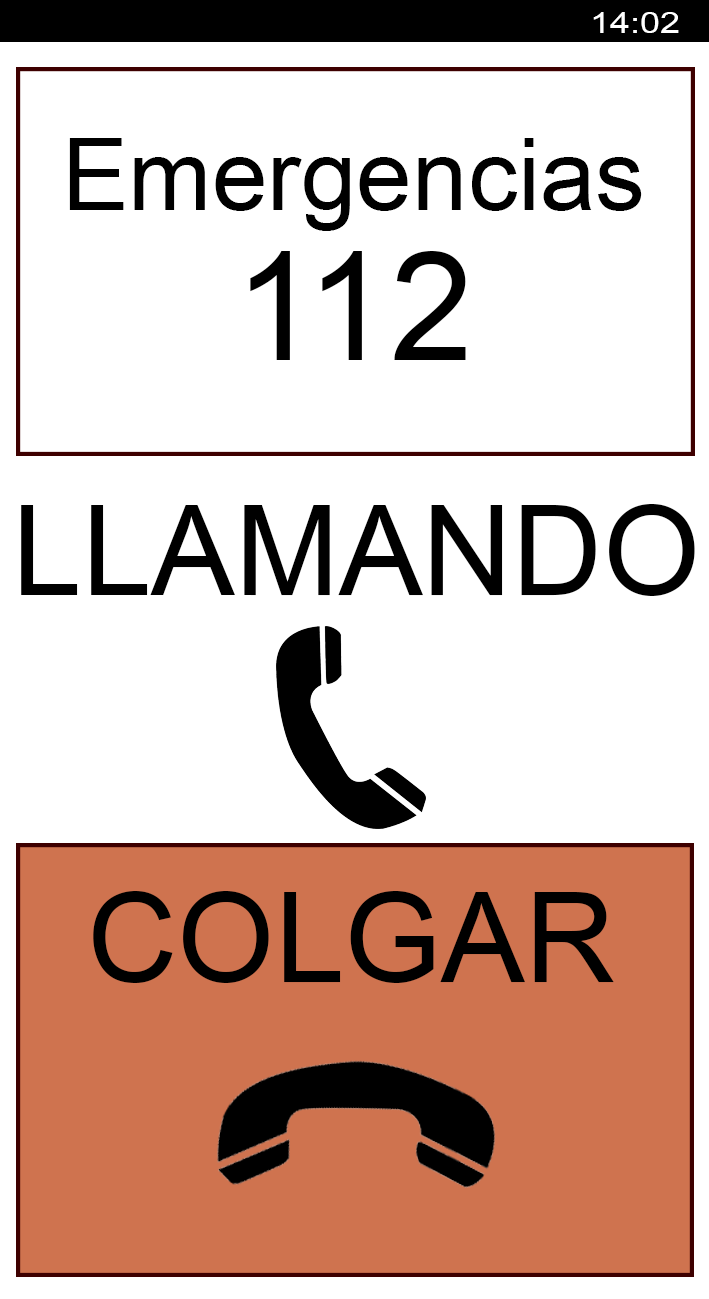
<style>
.page{position:relative;width:709px;height:1299px;background:#ffffff}
.page>*{position:absolute;margin:0}
.t1{font:29.2px "ArialMT";color:#ffffff;scale:1.22 1}
.t2{font:100px/150px "ArialMT";color:#000000}
.t3{font:150px/150px "ArialMT";color:#000000}
.t4{font:125px "ArialMT";color:#000000}
</style>
<div class="page">
<p class="t1" style="left:593px;top:12px;width:86px;height:21px">14:02</p>
<p class="t2" style="left:69px;top:138px;width:573px;height:222px;text-align:center">Emergencias<br><span class="t3">112</span></p>
<p class="t4" style="left:21px;top:504px;width:674px;height:92px">LLAMANDO</p>
<p class="t4" style="left:93px;top:891px;width:521px;height:92px">COLGAR</p>
</div>
